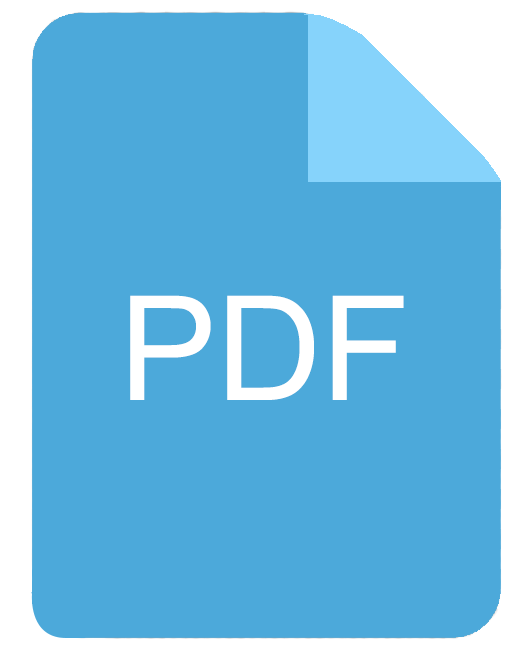
<style>
.page{position:relative;width:528px;height:661px;background:#4ca9da}
.page>*{position:absolute;margin:0}
.t1{font:145.4px "ArialMT";color:#ffffff}
</style>
<div class="page">
<p class="t1" style="left:130px;top:295px;width:274px;height:105px">PDF</p>
</div>
